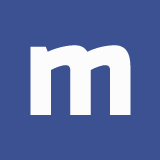
<style>
.page{position:relative;width:160px;height:160px;background:#3b5191}
.page>*{position:absolute;margin:0}
.t1{font:140px "KlavikaBold-Bold";color:#fcfcfc}
</style>
<div class="page">
<p class="t1" style="left:30px;top:45px;width:101px;height:70px">m</p>
</div>
